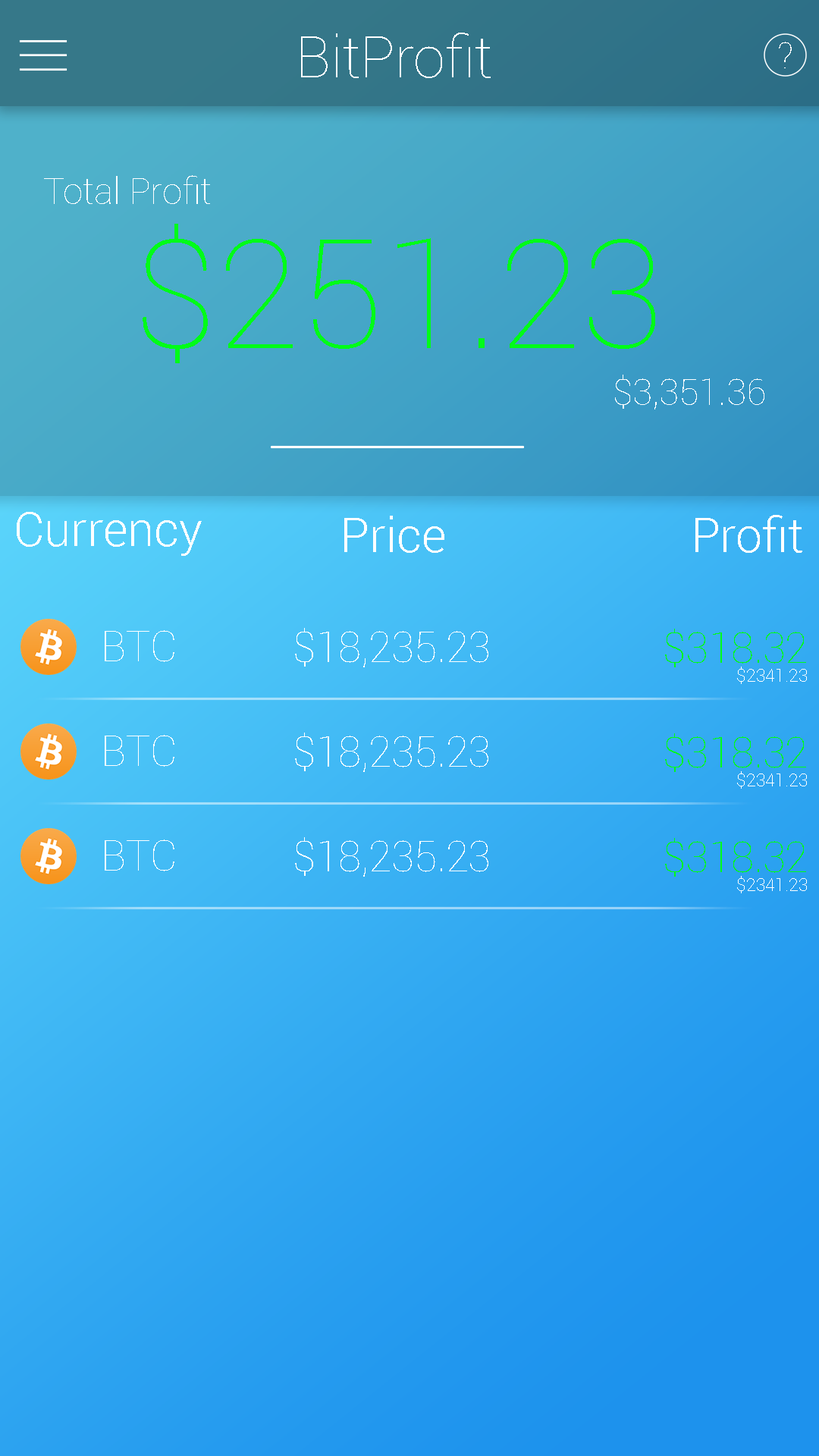
<style>
.page{position:relative;width:819px;height:1456px}
.page>*{position:absolute;margin:0}
.t1{font:57.5px "Roboto-Thin";color:#ffffff}
.t2{font:36.7px "Roboto-Thin";color:#ffffff}
.t3{font:36px "Roboto-Thin";color:#ffffff}
.t4{font:151.7px "Roboto-Thin";color:#00fd18}
.t5{font:47.7px "Roboto-Light";color:#ffffff}
.t6{font:41.5px "Roboto-Thin";color:#ffffff}
.t7{font:41.5px "Roboto-Thin";color:#00fd18}
.t8{font:17.7px "Roboto-Thin";color:#ffffff}
</style>
<div class="page">
<p class="t1" style="left:301px;top:33px;width:190px;height:45px">BitProfit</p>
<p class="t2" style="left:779px;top:42px;width:13px;height:26px">?</p>
<p class="t3" style="left:44px;top:175px;width:166px;height:29px">Total Profit</p>
<p class="t4" style="left:143px;top:224px;width:512px;height:139px">$251.23</p>
<p class="t3" style="left:615px;top:375px;width:149px;height:34px">$3,351.36</p>
<p class="t5" style="left:17px;top:512px;width:185px;height:44px">Currency</p>
<p class="t5" style="left:344px;top:516px;width:100px;height:37px">Price</p>
<p class="t5" style="left:695px;top:515px;width:107px;height:38px">Profit</p>
<p class="t6" style="left:295px;top:628px;width:193px;height:39px">$18,235.23</p>
<p class="t7" style="left:665px;top:629px;width:141px;height:38px">$318.32</p>
<p class="t6" style="left:105px;top:630px;width:69px;height:32px">BTC</p>
<p class="t8" style="left:737px;top:667px;width:70px;height:17px">$2341.23</p>
<p class="t6" style="left:105px;top:735px;width:69px;height:32px">BTC</p>
<p class="t6" style="left:295px;top:733px;width:193px;height:39px">$18,235.23</p>
<p class="t7" style="left:665px;top:733px;width:141px;height:39px">$318.32</p>
<p class="t8" style="left:737px;top:771px;width:70px;height:18px">$2341.23</p>
<p class="t6" style="left:105px;top:839px;width:69px;height:32px">BTC</p>
<p class="t6" style="left:295px;top:837px;width:193px;height:40px">$18,235.23</p>
<p class="t7" style="left:665px;top:838px;width:141px;height:39px">$318.32</p>
<p class="t8" style="left:737px;top:876px;width:70px;height:17px">$2341.23</p>
</div>
